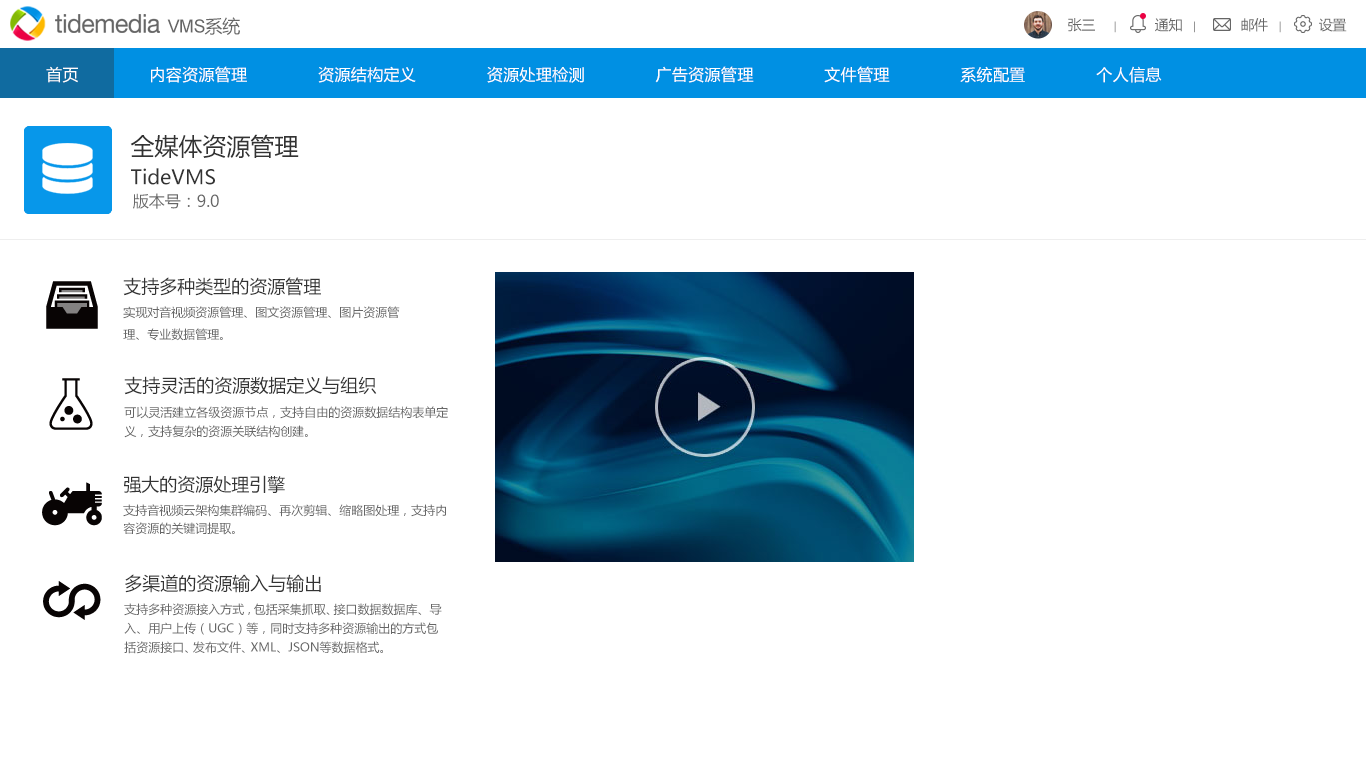
<style>
.page{position:relative;width:1366px;height:768px;background:#ffffff}
.page>*{position:absolute;margin:0}
.t1{font:18px "ArialMT";letter-spacing:-0.029em;color:#666666}
.t2{font:18px "MicrosoftYaHei";letter-spacing:-0.029em;color:#666666}
.t3{font:14px "MicrosoftYaHei";letter-spacing:-0.029em;color:#666666}
.t4{font:10px "MicrosoftYaHei";letter-spacing:-0.029em;color:#666666}
.t5{font:16px "MicrosoftYaHei";letter-spacing:0.02em;color:#ffffff}
.t6{font:24px/33px "MicrosoftYaHei";color:#333333}
.t7{font:20px/33px "MicrosoftYaHei";color:#333333}
.t8{font:16px "MicrosoftYaHei";color:#666666}
.t9{font:12px/22px "MicrosoftYaHei";color:#666666}
.t10{font:18px/29px "MicrosoftYaHei";color:#333333}
.t11{font:12px/19px "MicrosoftYaHei";color:#666666}
.t12{font:18px/30px "MicrosoftYaHei";color:#333333}
.t13{font:12px/18px "MicrosoftYaHei";color:#666666}
</style>
<div class="page">
<p class="t1" style="left:167px;top:17px;width:73px;height:18px">VMS<span class="t2">系统</span></p>
<p class="t3" style="left:1068px;top:18px;width:279px;height:15px">张三     <span class="t4">|          </span>通知   <span class="t4">|</span>            邮件   <span class="t4">|</span>          设置</p>
<p class="t5" style="left:46px;top:66px;width:1116px;height:17px">首页              内容资源管理              资源结构定义              资源处理检测              广告资源管理              文件管理              系统配置              个人信息</p>
<p class="t6" style="left:130px;top:134px;width:169px;height:51px">全媒体资源管理<br><span class="t7">TideVMS</span></p>
<p class="t8" style="left:133px;top:193px;width:86px;height:16px">版本号：9.0</p>
<p class="t9" style="left:123px;top:277px;width:277px;height:64px"><span class="t10">支持多种类型的资源管理<br></span>实现对音视频资源管理、图文资源管理、图片资源管理、专业数据管理。</p>
<p class="t11" style="left:124px;top:376px;width:324px;height:62px"><span class="t12">支持灵活的资源数据定义与组织<br></span>可以灵活建立各级资源节点，支持自由的资源数据结构表单定义，支持复杂的资源关联结构创建。</p>
<p class="t13" style="left:123px;top:475px;width:323px;height:60px"><span class="t10">强大的资源处理引擎<br></span>支持音视频云架构集群编码、再次剪辑、缩略图处理，支持内容资源的关键词提取。</p>
<p class="t11" style="left:124px;top:574px;width:318px;height:80px"><span class="t10">多渠道的资源输入与输出<br></span>支持多种资源接入方式，包括采集抓取、接口数据数据库、导入、用户上传（UGC）等，同时支持多种资源输出的方式包括资源接口、发布文件、XML、JSON等数据格式。</p>
</div>
